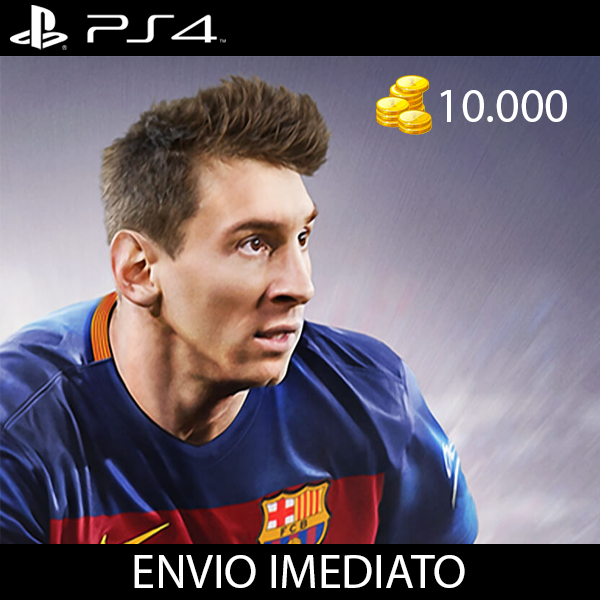
<style>
.page{position:relative;width:600px;height:600px}
.page>*{position:absolute;margin:0}
.t1{font:48px "MyriadPro-Regular";color:#ffffff}
</style>
<div class="page">
<p class="t1" style="left:440px;top:90px;width:127px;height:32px">10.000</p>
<p class="t1" style="left:134px;top:555px;width:331px;height:33px">ENVIO IMEDIATO</p>
</div>
